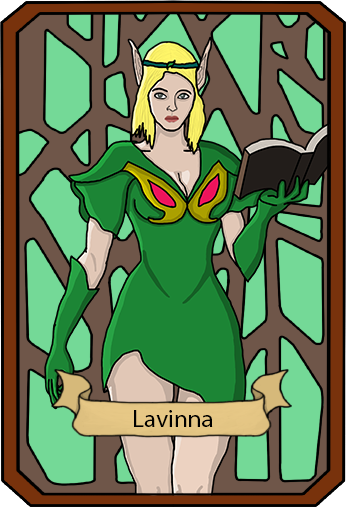
<style>
.page{position:relative;width:346px;height:507px}
.page>*{position:absolute;margin:0}
.t1{font:25px "MyriadPro-Regular";color:#000000}
</style>
<div class="page">
<p class="t1" style="left:134px;top:410px;width:79px;height:17px">Lavinna</p>
</div>
